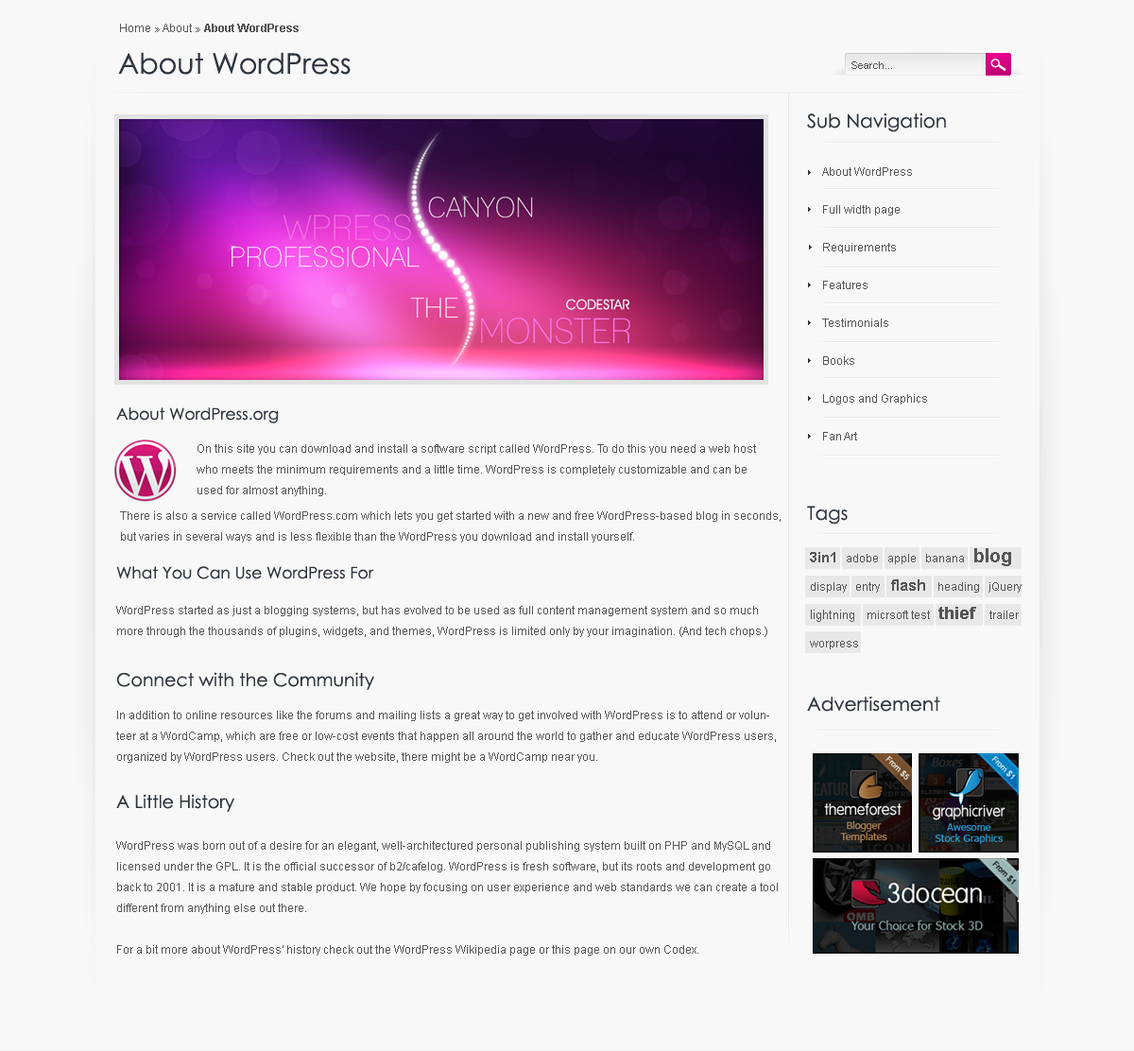
<style>
.page{position:relative;width:1134px;height:1051px;background:#f8f8f8}
.page>*{position:absolute;margin:0}
.t1{font:11.3px "Arial-BoldMT";color:#555555}
.t2{font:11.3px "ArialMT";color:#555555}
.t3{font:28.4px "CenturyGothic";color:#2e353e}
.t4{font:10.4px "ArialMT";color:#555555}
.t5{font:18.9px "CenturyGothic";color:#2e353e}
.t6{font:11.3px/37.8px "ArialMT";color:#555555}
.t7{font:16.1px "CenturyGothic";color:#2e353e}
.t8{font:11.3px/20.8px "ArialMT";color:#555555}
.t9{font:11.3px/28.4px "ArialMT";color:#555555}
.t10{font:14.2px/28.4px "Arial-BoldMT";color:#555555}
.t11{font:18.9px/28.4px "Arial-BoldMT";color:#555555}
.t12{font:15.1px/28.4px "Arial-BoldMT";color:#555555}
.t13{font:12.3px/28.4px "ArialMT";color:#555555}
.t14{font:17px/28.4px "Arial-BoldMT";color:#555555}
.t15{font:18px "CenturyGothic";color:#2e353e}
</style>
<div class="page">
<p class="t1" style="left:120px;top:24px;width:179px;height:8px"><span class="t2"> Home » About » </span>About WordPress</p>
<p class="t3" style="left:118px;top:52px;width:233px;height:23px">About WordPress</p>
<p class="t4" style="left:852px;top:61px;width:40px;height:8px">Search...</p>
<p class="t5" style="left:807px;top:113px;width:139px;height:19px">Sub Navigation</p>
<p class="t6" style="left:822px;top:167px;width:105px;height:274px">About WordPress<br>Full width page<br>Requirements<br>Features<br>Testimonials<br>Books<br>Logos and Graphics<br>Fan Art</p>
<p class="t7" style="left:116px;top:407px;width:162px;height:16px">About WordPress.org</p>
<p class="t8" style="left:197px;top:444px;width:559px;height:52px">On this site you can download and install a software script called WordPress. To do this you need a web host who meets the minimum requirements and a little time. WordPress is completely customizable and can be used for almost anything.</p>
<p class="t5" style="left:807px;top:506px;width:41px;height:19px">Tags</p>
<p class="t8" style="left:120px;top:511px;width:661px;height:32px">There is also a service called WordPress.com which lets you get started with a new and free WordPress-based blog in seconds, but varies in several ways and is less flexible than the WordPress you download and install yourself.</p>
<p class="t9" style="left:810px;top:548px;width:212px;height:101px"><span class="t10">3in1</span>   adobe   apple   banana   <span class="t11">blog   </span>display   entry    <span class="t12">flash   </span>heading   jQuery   <span class="t13">lightning   </span>micrsoft test   <span class="t14">thief   </span>trailer   worpress</p>
<p class="t7" style="left:116px;top:566px;width:258px;height:13px">What You Can Use WordPress For</p>
<p class="t8" style="left:116px;top:606px;width:652px;height:31px">WordPress started as just a blogging systems, but has evolved to be used as full content management system and so much more through the thousands of plugins, widgets, and themes, WordPress is limited only by your imagination. (And tech chops.)</p>
<p class="t15" style="left:117px;top:672px;width:257px;height:18px">Connect with the Community</p>
<p class="t5" style="left:807px;top:697px;width:134px;height:15px">Advertisement</p>
<p class="t8" style="left:116px;top:711px;width:660px;height:52px">In addition to online resources like the forums and mailing lists a great way to get involved with WordPress is to attend or volunteer at a WordCamp, which are free or low-cost events that happen all around the world to gather and educate WordPress users, organized by WordPress users. Check out the website, there might be a WordCamp near you.</p>
<p class="t15" style="left:116px;top:794px;width:118px;height:18px">A Little History</p>
<p class="t8" style="left:116px;top:841px;width:662px;height:115px">WordPress was born out of a desire for an elegant, well-architectured personal publishing system built on PHP and MySQL and licensed under the GPL. It is the official successor of b2/cafelog. WordPress is fresh software, but its roots and development go back to 2001. It is a mature and stable product. We hope by focusing on user experience and web standards we can create a tool different from anything else out there.<br><br>For a bit more about WordPress' history check out the WordPress Wikipedia page or this page on our own Codex.</p>
</div>
